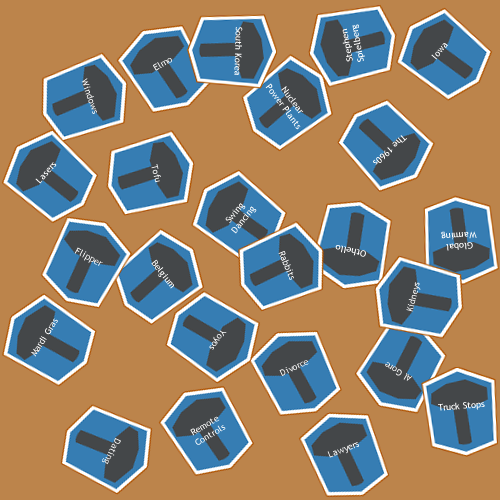
<style>
.page{position:relative;width:500px;height:500px;background:#bc844b}
.page>*{position:absolute;margin:0}
.t1{font:9px "TrebuchetMS";color:#ffffff}
.t2{font:9px/10.8px "TrebuchetMS";color:#ffffff}
.t3{font:8.9px "TrebuchetMS";color:#ffffff}
.t4{font:9.1px "TrebuchetMS";color:#ffffff}
.t5{font:9.1px/10.9px "TrebuchetMS";color:#ffffff}
.t6{font:8.9px/10.7px "TrebuchetMS";color:#ffffff}
.t7{font:8.9px "TrebuchetMS"}
</style>
<div class="page">
<p class="t1" style="left:234px;top:27px;width:9px;height:48px;rotate:92deg">South Korea</p>
<p class="t2" style="left:342px;top:24px;width:23px;height:38px;text-align:center;rotate:-101deg">Stephen<br>Spielberg</p>
<p class="t1" style="left:431px;top:43px;width:17px;height:17px;rotate:-50deg">Iowa</p>
<p class="t3" style="left:153px;top:58px;width:19px;height:13px;rotate:-30deg">Elmo</p>
<p class="t4" style="left:81px;top:78px;width:16px;height:36px;rotate:71deg">Windows</p>
<p class="t5" style="left:265px;top:83px;width:39px;height:47px;text-align:center;rotate:53deg">Nuclear<br>Power Plants</p>
<p class="t4" style="left:373px;top:135px;width:34px;height:30px;rotate:137deg">The 1960s</p>
<p class="t4" style="left:35px;top:162px;width:22px;height:22px;rotate:-48deg">Lasers</p>
<p class="t4" style="left:151px;top:164px;width:10px;height:19px;rotate:76deg">Tofu</p>
<p class="t2" style="left:225px;top:203px;width:32px;height:31px;text-align:center;rotate:-51deg">Swing<br>Dancing</p>
<p class="t6" style="left:441px;top:231px;width:36px;height:20px;text-align:center;rotate:176deg">Global<br>Warming</p>
<p class="t1" style="left:335px;top:245px;width:31px;height:12px;rotate:-168deg">Othello</p>
<p class="t3" style="left:74px;top:247px;width:29px;height:19px;rotate:28deg">Flipper</p>
<p class="t4" style="left:278px;top:251px;width:16px;height:29px;rotate:68deg">Rabbits</p>
<p class="t1" style="left:151px;top:259px;width:23px;height:30px;rotate:52deg">Belgium</p>
<p class="t4" style="left:406px;top:282px;width:15px;height:30px;rotate:-76deg">Kidneys</p>
<p class="t1" style="left:31px;top:318px;width:27px;height:39px;rotate:-58deg">Mardi Gras</p>
<p class="t1" style="left:209px;top:330px;width:18px;height:20px;rotate:123deg">Yoyos</p>
<p class="t7" style="left:279px;top:360px;width:30px;height:16px;rotate:-25deg">Divorce</p>
<p class="t4" style="left:385px;top:362px;width:28px;height:19px;rotate:-149deg">Al Gore</p>
<p class="t1" style="left:438px;top:402px;width:47px;height:9px;rotate:-5deg">Truck Stops</p>
<p class="t5" style="left:190px;top:416px;width:36px;height:29px;text-align:center;rotate:-31deg">Remote<br>Controls</p>
<p class="t1" style="left:102px;top:438px;width:19px;height:27px;rotate:116deg">Dating</p>
<p class="t1" style="left:327px;top:442px;width:32px;height:16px;rotate:-21deg">Lawyers</p>
</div>
